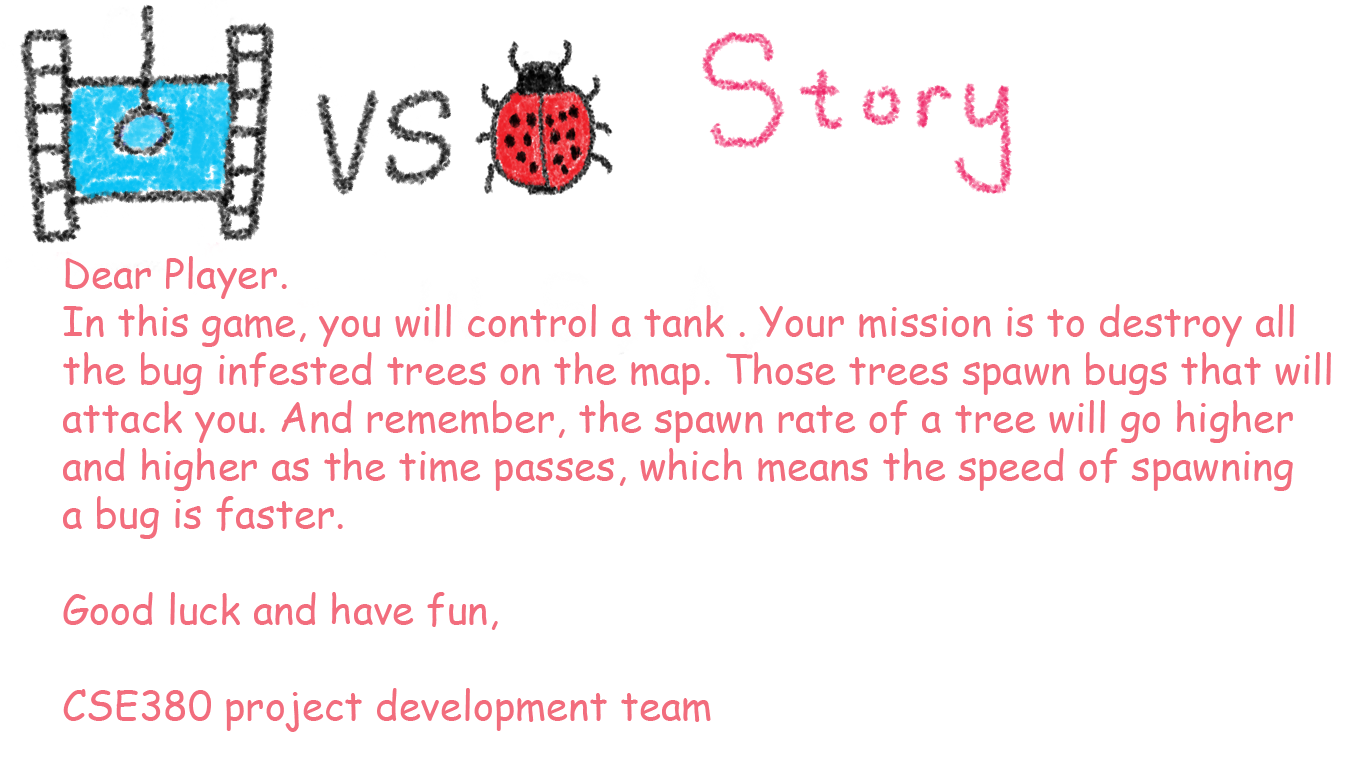
<style>
.page{position:relative;width:1366px;height:768px;background:#ffffff}
.page>*{position:absolute;margin:0}
.t1{font:40px "ComicSansMS";color:#f26d7d}
</style>
<div class="page">
<p class="t1" style="left:63px;top:256px;width:1268px;height:476px">Dear Player.<br>In this game, you will control a tank . Your mission is to destroy all <br>the bug infested trees on the map. Those trees spawn bugs that will <br>attack you. And remember, the spawn rate of a tree will go higher <br>and higher as the time passes, which means the speed of spawning <br>a bug is faster. <br><br>Good luck and have fun,<br><br>CSE380 project development team</p>
</div>
